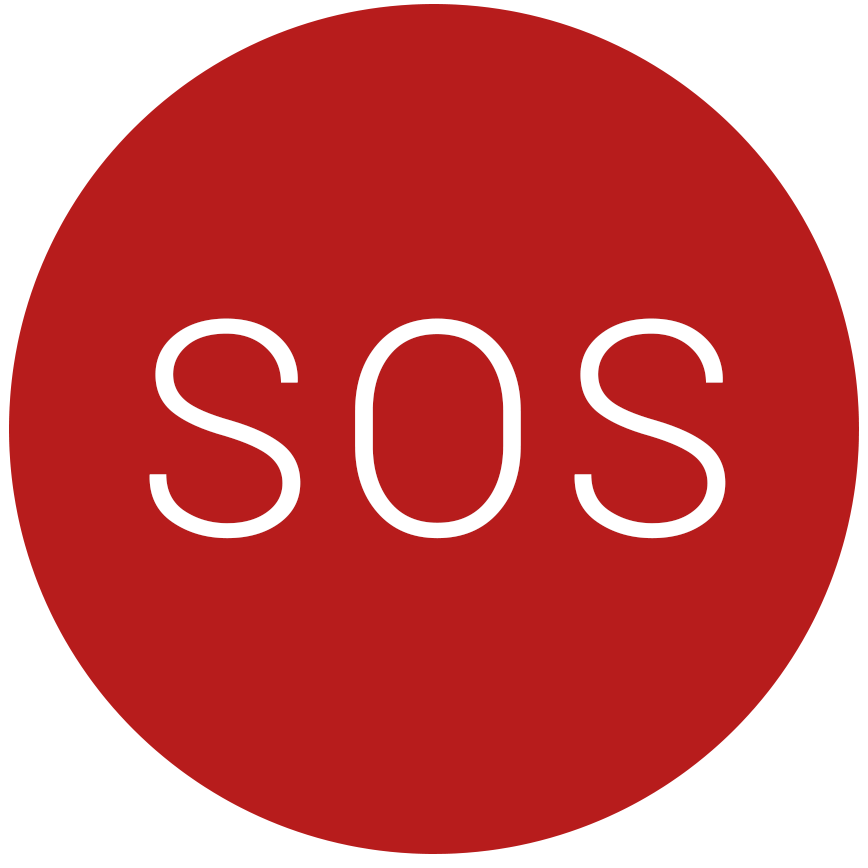
<style>
.page{position:relative;width:868px;height:868px;background:#b71c1c}
.page>*{position:absolute;margin:0}
.t1{font:300px "Roboto-Light";letter-spacing:0.07em;color:#ffffff}
</style>
<div class="page">
<p class="t1" style="left:149px;top:318px;width:577px;height:221px">SOS</p>
</div>
